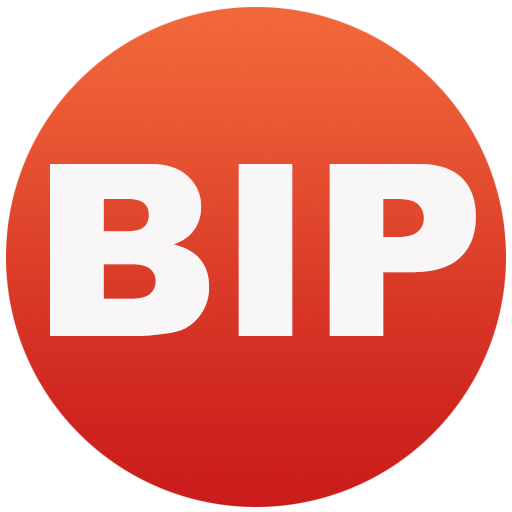
<style>
.page{position:relative;width:512px;height:512px;background:#ffffff}
.page>*{position:absolute;margin:0}
.t1{font:240px "Arial-Black";color:#f8f6f6}
</style>
<div class="page">
<p class="t1" style="left:50px;top:164px;width:426px;height:172px">BIP</p>
</div>
